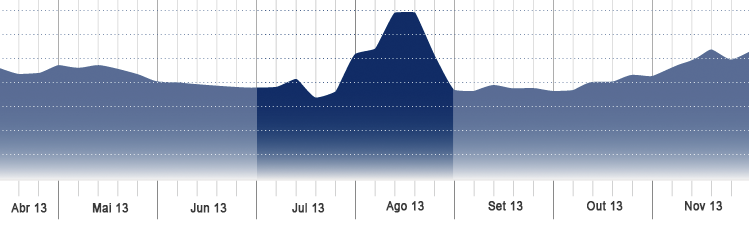
<style>
.page{position:relative;width:749px;height:225px;background:#ffffff}
.page>*{position:absolute;margin:0}
.t1{font:12.1px "ArialMT";letter-spacing:0.025em;color:#3a3a3a;font-weight:bold;scale:0.91 1}
</style>
<div class="page">
<p class="t1" style="left:11px;top:203px;width:36px;height:10px">Abr 13</p>
<p class="t1" style="left:92px;top:203px;width:37px;height:10px">Mai 13</p>
<p class="t1" style="left:190px;top:203px;width:37px;height:10px">Jun 13</p>
<p class="t1" style="left:292px;top:203px;width:33px;height:10px">Jul 13</p>
<p class="t1" style="left:386px;top:201px;width:38px;height:12px">Ago 13</p>
<p class="t1" style="left:488px;top:201px;width:35px;height:10px">Set 13</p>
<p class="t1" style="left:587px;top:201px;width:36px;height:10px">Out 13</p>
<p class="t1" style="left:685px;top:201px;width:38px;height:10px">Nov 13</p>
</div>
